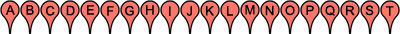
<style>
.page{position:relative;width:400px;height:34px;background:#ffffff}
.page>*{position:absolute;margin:0}
.t1{font:13px "ArialMT";color:#000000}
</style>
<div class="page">
<p class="t1" style="left:5px;top:5px;width:10px;height:10px">A</p>
<p class="t1" style="left:26px;top:5px;width:8px;height:10px">B</p>
<p class="t1" style="left:46px;top:5px;width:9px;height:11px">C</p>
<p class="t1" style="left:66px;top:5px;width:9px;height:11px">D</p>
<p class="t1" style="left:87px;top:5px;width:7px;height:10px">E</p>
<p class="t1" style="left:107px;top:6px;width:7px;height:10px">F</p>
<p class="t1" style="left:125px;top:5px;width:9px;height:11px">G</p>
<p class="t1" style="left:146px;top:5px;width:8px;height:10px">H</p>
<p class="t1" style="left:169px;top:6px;width:2px;height:10px">I</p>
<p class="t1" style="left:186px;top:6px;width:6px;height:10px">J</p>
<p class="t1" style="left:206px;top:6px;width:8px;height:10px">K</p>
<p class="t1" style="left:227px;top:6px;width:6px;height:10px">L</p>
<p class="t1" style="left:245px;top:5px;width:10px;height:10px">M</p>
<p class="t1" style="left:265px;top:5px;width:9px;height:11px">N</p>
<p class="t1" style="left:285px;top:5px;width:10px;height:11px">O</p>
<p class="t1" style="left:306px;top:5px;width:8px;height:10px">P</p>
<p class="t1" style="left:325px;top:5px;width:10px;height:11px">Q</p>
<p class="t1" style="left:346px;top:5px;width:9px;height:11px">R</p>
<p class="t1" style="left:365px;top:5px;width:9px;height:11px">S</p>
<p class="t1" style="left:386px;top:6px;width:8px;height:10px">T</p>
</div>
